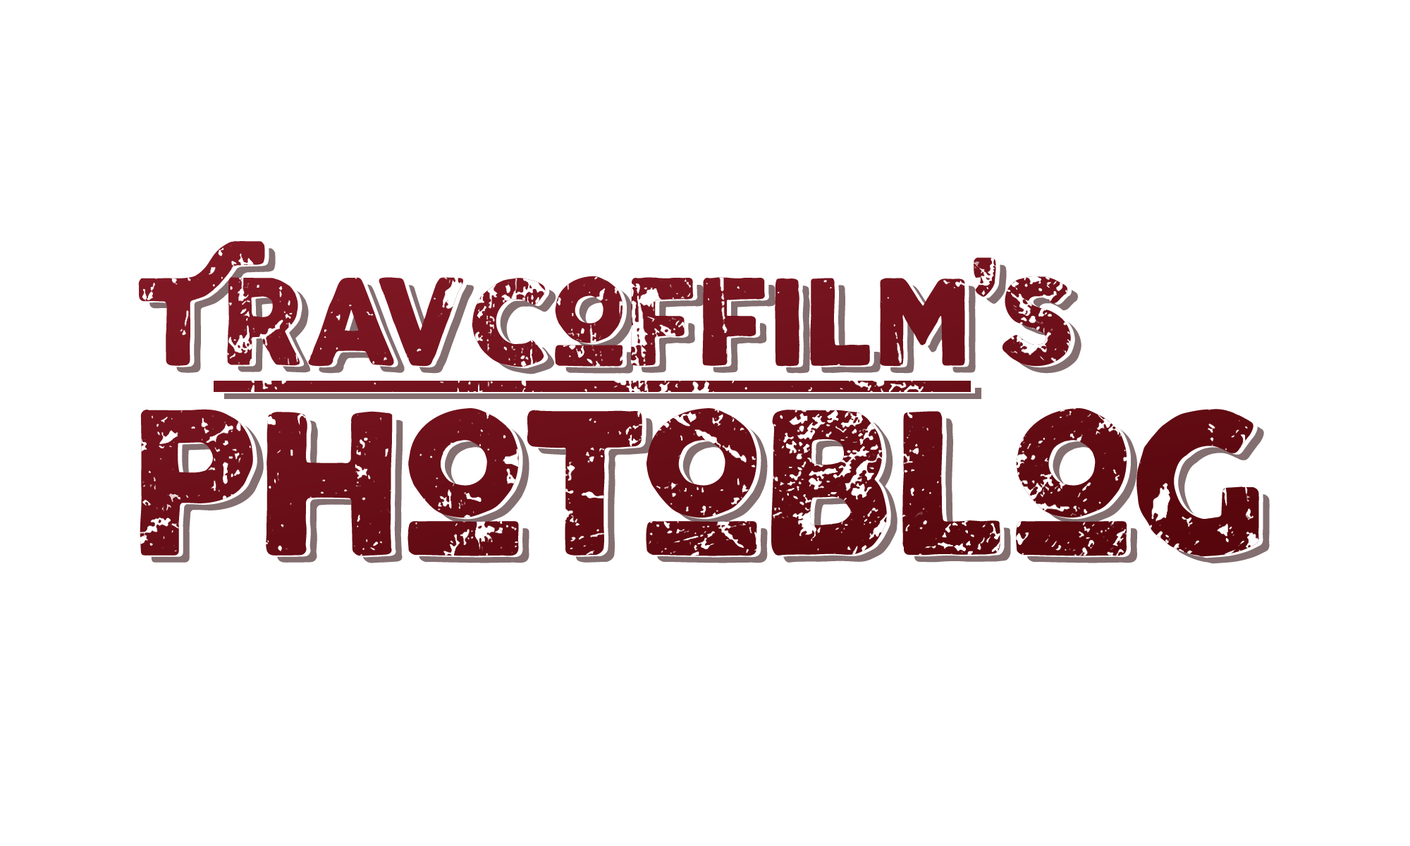
<style>
.page{position:relative;width:1410px;height:846px;background:#ffffff}
.page>*{position:absolute;margin:0}
.t1{font:156px "UVFBrawls-Regular";color:#791313}
.t2{font:255.8px "UVFBrawls-Regular";color:#791313}
</style>
<div class="page">
<p class="t1" style="left:138px;top:241px;width:1121px;height:316px">Travcoffilm’s<span class="t2"> <br>photoblog</span></p>
</div>
